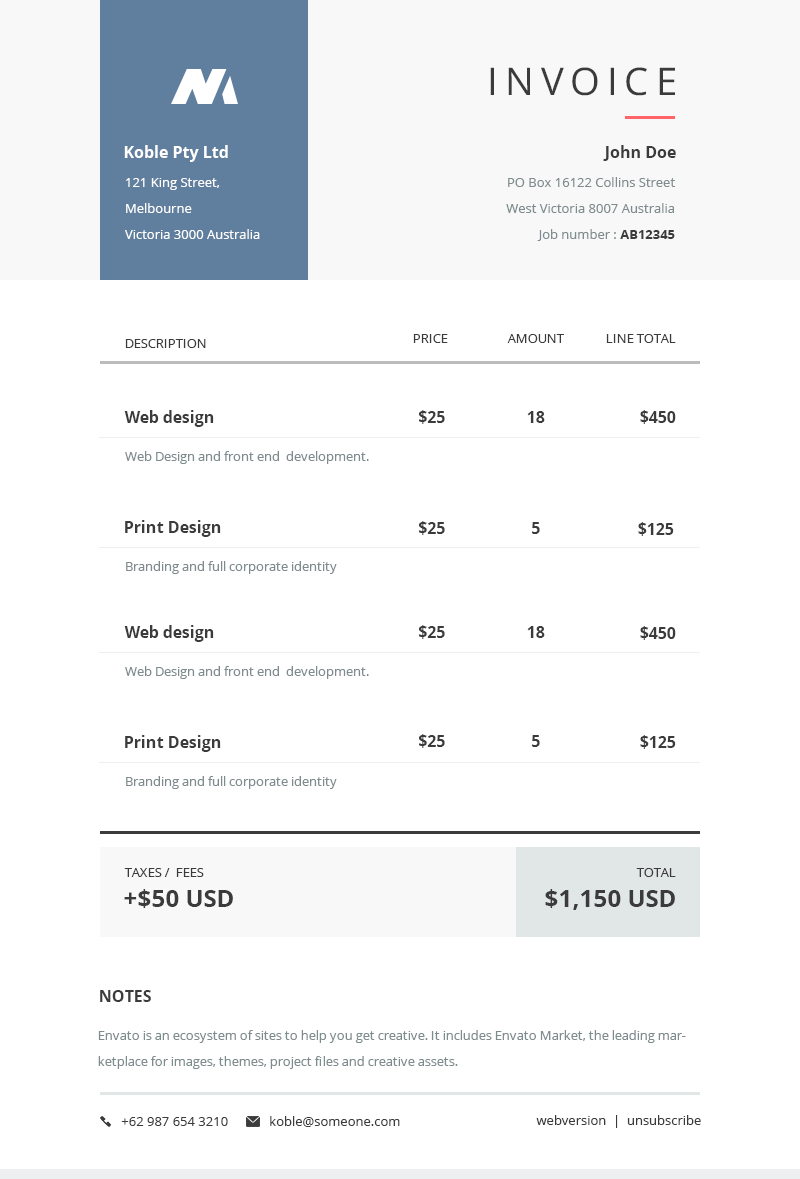
<style>
.page{position:relative;width:800px;height:1179px;background:#ffffff}
.page>*{position:absolute;margin:0}
.t1{font:38px "OpenSans";letter-spacing:0.18em;color:#3b3b3b;text-transform:uppercase}
.t2{font:16px "OpenSans-Bold";color:#ffffff}
.t3{font:16px "OpenSans-Bold";color:#3b3b3b}
.t4{font:13px/26px "OpenSans";color:#ffffff}
.t5{font:13px/26px "OpenSans";color:#7f8c8d}
.t6{font:13px "OpenSans";color:#7f8c8d}
.t7{font:13px "OpenSans-Bold";color:#3b3b3b}
.t8{font:13px "OpenSans";color:#3b3b3b;text-transform:uppercase}
.t9{font:24px "OpenSans-Bold";color:#3b3b3b}
.t10{font:16px "OpenSans-Bold";color:#3b3b3b;text-transform:uppercase}
.t11{font:13px "OpenSans";color:#3b3b3b}
</style>
<div class="page">
<p class="t1" style="left:490px;top:67px;width:185px;height:29px">invoice</p>
<p class="t2" style="left:124px;top:145px;width:104px;height:17px">Koble Pty Ltd</p>
<p class="t3" style="left:603px;top:145px;width:73px;height:16px">John Doe</p>
<p class="t4" style="left:125px;top:178px;width:135px;height:61px">121 King Street, Melbourne <br>Victoria 3000 Australia</p>
<p class="t5" style="left:506px;top:177px;width:169px;height:64px;text-align:right">PO Box 16122 Collins Street West Victoria 8007 Australia<br><span class="t6">Job number : </span><span class="t7">AB12345</span></p>
<p class="t8" style="left:125px;top:339px;width:81px;height:9px">description</p>
<p class="t8" style="left:413px;top:334px;width:35px;height:9px">price</p>
<p class="t8" style="left:507px;top:334px;width:57px;height:9px">amount</p>
<p class="t8" style="left:606px;top:334px;width:70px;height:9px">line total</p>
<p class="t3" style="left:124px;top:410px;width:90px;height:17px">Web design</p>
<p class="t3" style="left:419px;top:410px;width:26px;height:14px">$25</p>
<p class="t3" style="left:527px;top:411px;width:18px;height:12px">18</p>
<p class="t3" style="left:640px;top:410px;width:36px;height:14px">$450</p>
<p class="t6" style="left:125px;top:451px;width:244px;height:13px">Web Design and front end  development.</p>
<p class="t3" style="left:125px;top:520px;width:96px;height:17px">Print Design</p>
<p class="t3" style="left:419px;top:521px;width:26px;height:14px">$25</p>
<p class="t3" style="left:532px;top:522px;width:8px;height:12px">5</p>
<p class="t3" style="left:638px;top:522px;width:36px;height:14px">$125</p>
<p class="t6" style="left:126px;top:561px;width:211px;height:13px">Branding and full corporate identity</p>
<p class="t3" style="left:124px;top:625px;width:90px;height:17px">Web design</p>
<p class="t3" style="left:419px;top:625px;width:26px;height:14px">$25</p>
<p class="t3" style="left:527px;top:626px;width:18px;height:12px">18</p>
<p class="t3" style="left:640px;top:626px;width:36px;height:14px">$450</p>
<p class="t6" style="left:125px;top:666px;width:244px;height:13px">Web Design and front end  development.</p>
<p class="t3" style="left:125px;top:735px;width:96px;height:17px">Print Design</p>
<p class="t3" style="left:419px;top:734px;width:26px;height:14px">$25</p>
<p class="t3" style="left:532px;top:735px;width:8px;height:12px">5</p>
<p class="t3" style="left:640px;top:735px;width:36px;height:14px">$125</p>
<p class="t6" style="left:126px;top:776px;width:211px;height:13px">Branding and full corporate identity</p>
<p class="t8" style="left:124px;top:868px;width:80px;height:9px">taxes /  fees</p>
<p class="t8" style="left:636px;top:868px;width:40px;height:9px">Total</p>
<p class="t9" style="left:124px;top:889px;width:109px;height:19px">+$50 USD</p>
<p class="t9" style="left:545px;top:889px;width:130px;height:21px">$1,150 USD</p>
<p class="t10" style="left:100px;top:990px;width:51px;height:12px">Notes</p>
<p class="t5" style="left:98px;top:1030px;width:588px;height:39px">Envato is an ecosystem of sites to help you get creative. It includes Envato Market, the leading marketplace for images, themes, project files and creative assets.</p>
<p class="t11" style="left:121px;top:1117px;width:107px;height:9px">+62 987 654 3210</p>
<p class="t11" style="left:270px;top:1116px;width:130px;height:11px">koble@someone.com</p>
<p class="t11" style="left:536px;top:1115px;width:165px;height:13px">webversion  |  unsubscribe</p>
</div>
